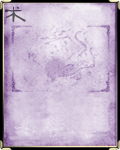
<style>
.page{position:relative;width:120px;height:150px}
.page>*{position:absolute;margin:0}
.t1{font:25px "FZGLJW--GB1-0";color:#554f58}
</style>
<div class="page">
<p class="t1" style="left:4px;top:6px;width:22px;height:16px">术</p>
</div>
